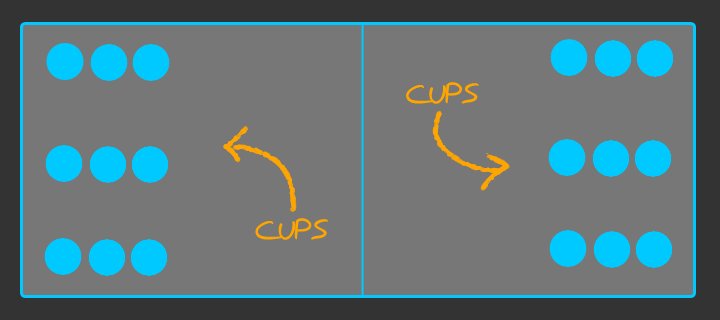
<style>
.page{position:relative;width:720px;height:320px;background:#777777}
.page>*{position:absolute;margin:0}
.t1{font:30px "EasySpeech";color:#ffa500}
</style>
<div class="page">
<p class="t1" style="left:406px;top:82px;width:73px;height:22px">CUPS</p>
<p class="t1" style="left:255px;top:218px;width:74px;height:22px">CUPS</p>
</div>
